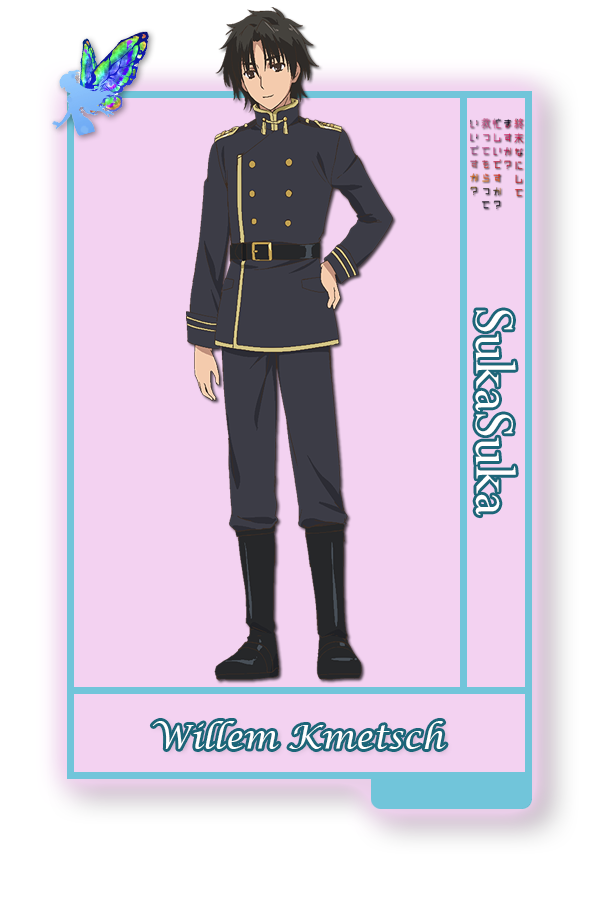
<style>
.page{position:relative;width:600px;height:900px;background:#f3d2f1}
.page>*{position:absolute;margin:0}
.t1{font:62.5px "Perpetua";color:#ffffff}
.t2{font:33.3px "LucidaCalligraphy-Italic";color:#ffffff}
</style>
<div class="page">
<p class="t1" style="left:475px;top:310px;width:41px;height:206px;rotate:90deg">SukaSuka</p>
<p class="t2" style="left:152px;top:721px;width:294px;height:28px">Willem Kmetsch</p>
</div>
